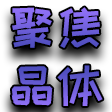
<style>
.page{position:relative;width:112px;height:112px}
.page>*{position:absolute;margin:0}
.t1{font:48px "HappyZcool-2016"}
</style>
<div class="page">
<p class="t1" style="left:11px;top:7px;width:92px;height:99px;text-align:center">聚焦<br>晶体</p>
</div>
